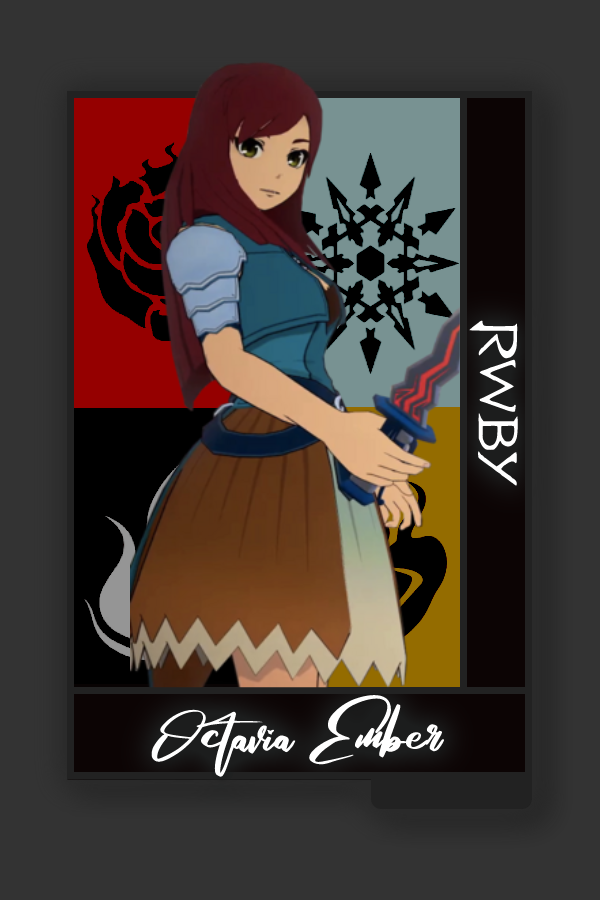
<style>
.page{position:relative;width:600px;height:900px;background:#333333}
.page>*{position:absolute;margin:0}
.t1{font:61.3px "RWBY_Style";color:#ffffff;scale:1.25 1}
.t2{font:76.6px "RosegaFREE";color:#ffffff;scale:0.91 1}
</style>
<div class="page">
<p class="t1" style="left:469px;top:320px;width:49px;height:166px;rotate:90deg">RWBY</p>
<p class="t2" style="left:151px;top:687px;width:294px;height:91px">Octavia Ember</p>
</div>
